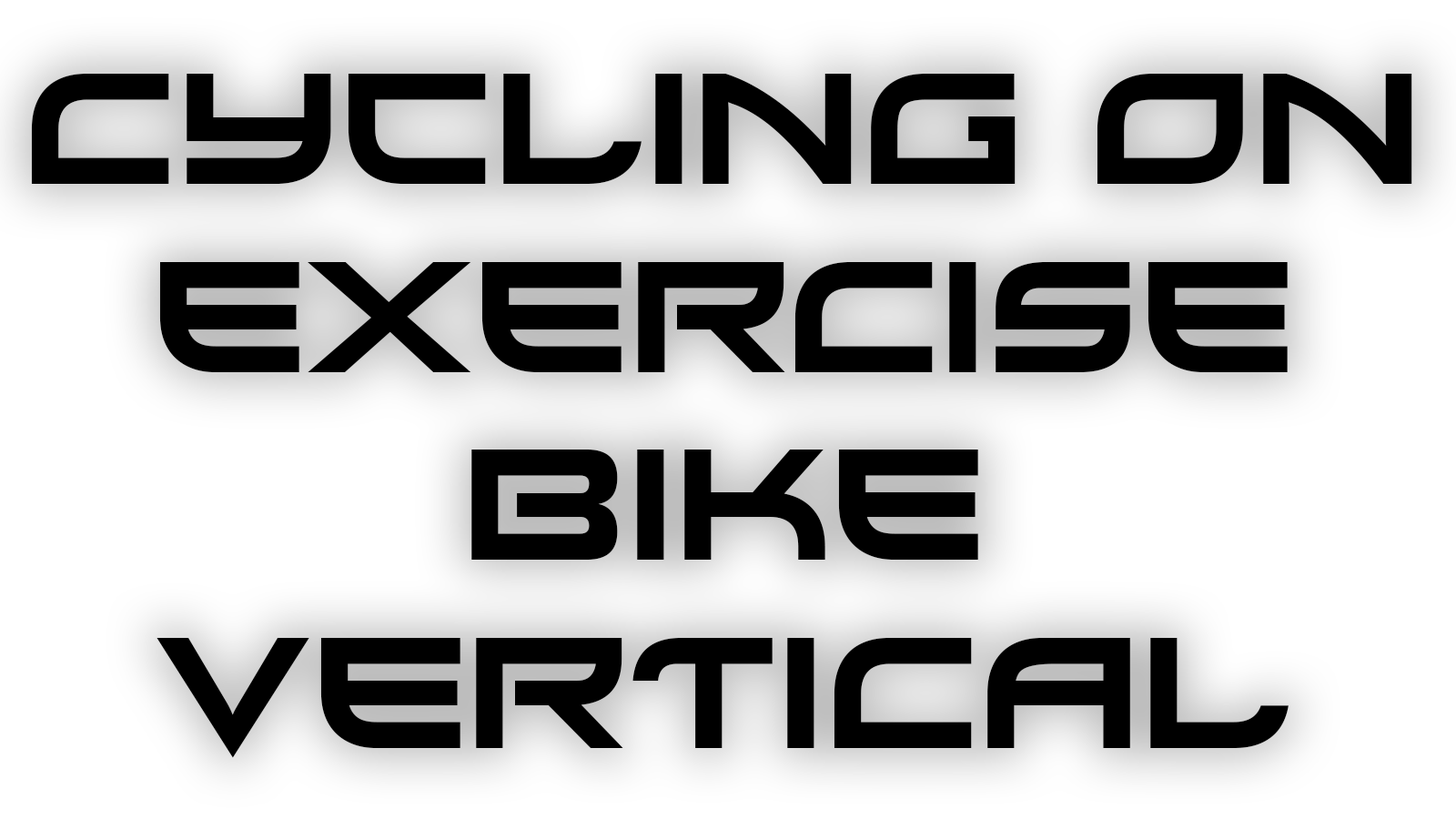
<style>
.page{position:relative;width:1456px;height:819px;background:#ffffff}
.page>*{position:absolute;margin:0}
.t1{font:156.7px "Xirod-Regular";color:#000000}
</style>
<div class="page">
<p class="t1" style="left:31px;top:74px;width:1381px;height:684px;text-align:center">Cycling On<br>Exercise<br>Bike<br>Vertical</p>
</div>
